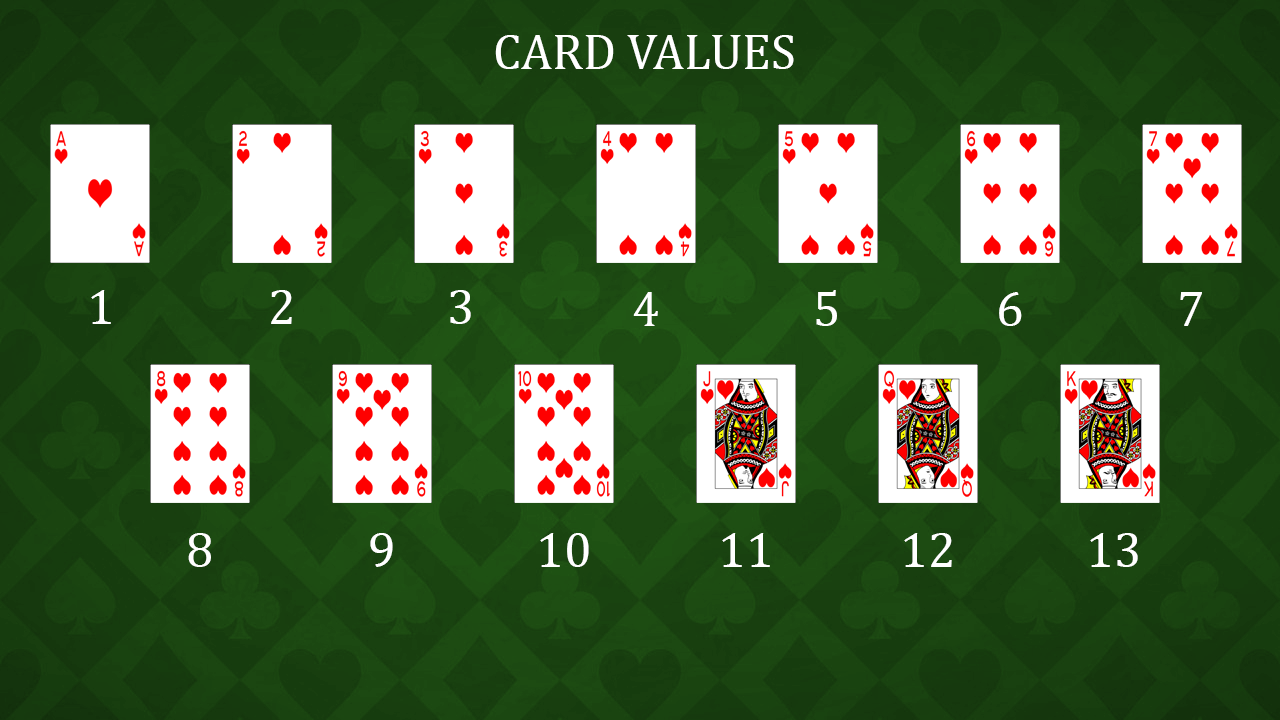
<style>
.page{position:relative;width:1280px;height:720px}
.page>*{position:absolute;margin:0}
.t1{font:50px "CambriaMath";color:#ffffff}
</style>
<div class="page">
<p class="t1" style="left:495px;top:35px;width:299px;height:34px">CARD VALUES</p>
<p class="t1" style="left:91px;top:290px;width:20px;height:34px">1</p>
<p class="t1" style="left:271px;top:290px;width:21px;height:34px">2</p>
<p class="t1" style="left:450px;top:290px;width:21px;height:34px">3</p>
<p class="t1" style="left:633px;top:292px;width:25px;height:34px">4</p>
<p class="t1" style="left:816px;top:290px;width:21px;height:36px">5</p>
<p class="t1" style="left:999px;top:292px;width:23px;height:34px">6</p>
<p class="t1" style="left:1180px;top:292px;width:22px;height:34px">7</p>
<p class="t1" style="left:188px;top:533px;width:23px;height:34px">8</p>
<p class="t1" style="left:370px;top:533px;width:23px;height:34px">9</p>
<p class="t1" style="left:540px;top:533px;width:49px;height:34px">10</p>
<p class="t1" style="left:722px;top:533px;width:48px;height:34px">11</p>
<p class="t1" style="left:904px;top:533px;width:48px;height:34px">12</p>
<p class="t1" style="left:1090px;top:533px;width:48px;height:34px">13</p>
</div>
